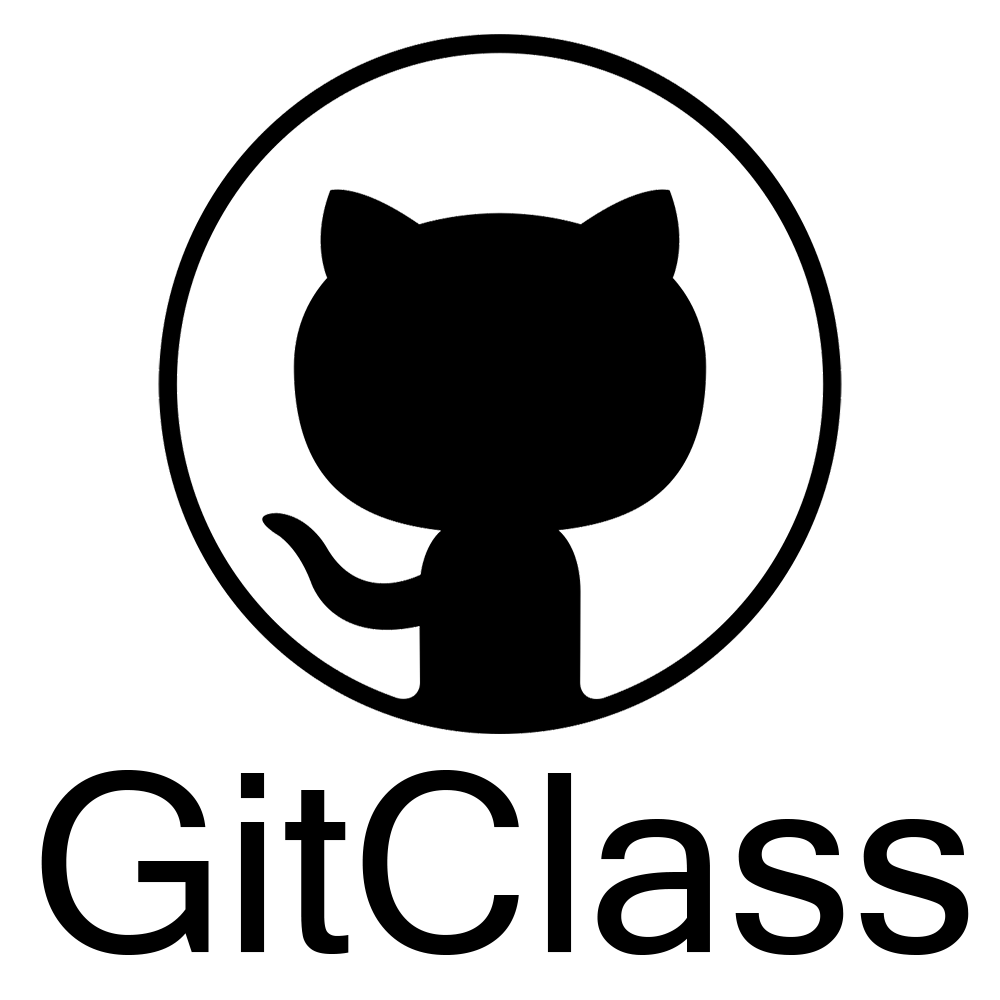
<style>
.page{position:relative;width:1000px;height:1000px;background:#ffffff}
.page>*{position:absolute;margin:0}
.t1{font:250px "MicrosoftSansSerif";color:#000000}
</style>
<div class="page">
<p class="t1" style="left:41px;top:770px;width:928px;height:185px">GitClass</p>
</div>
